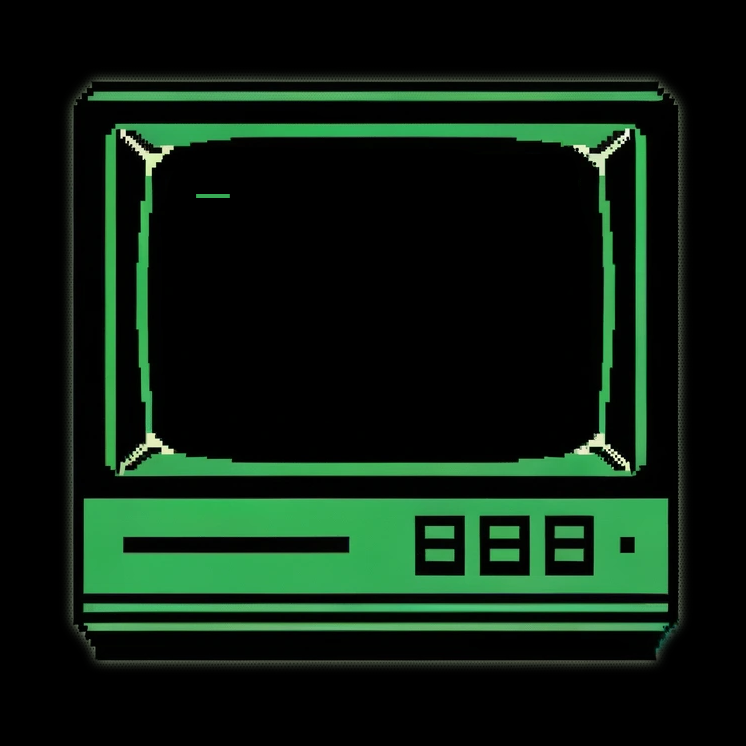
<style>
.page{position:relative;width:746px;height:746px;background:#000000}
.page>*{position:absolute;margin:0}
.t1{font:72px "Algerian";color:#38a955}
</style>
<div class="page">
<p class="t1" style="left:196px;top:194px;width:34px;height:4px">_</p>
</div>
